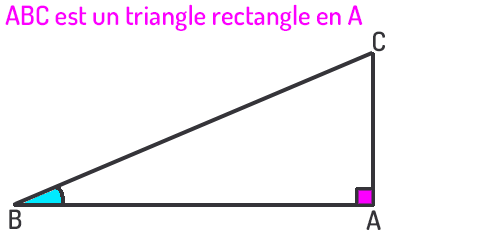
<style>
.page{position:relative;width:500px;height:236px;background:#ffffff}
.page>*{position:absolute;margin:0}
.t1{font:26.7px "Dosis-SemiBold";color:#fc00ff}
.t2{font:26.7px "Dosis-SemiBold";color:#353439}
</style>
<div class="page">
<p class="t1" style="left:5px;top:4px;width:358px;height:27px">ABC est un triangle rectangle en A</p>
<p class="t2" style="left:373px;top:31px;width:12px;height:21px">C</p>
<p class="t2" style="left:9px;top:209px;width:13px;height:20px">B</p>
<p class="t2" style="left:366px;top:210px;width:15px;height:20px">A</p>
</div>
